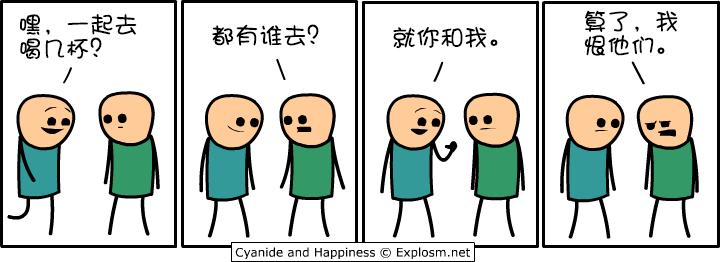
<style>
.page{position:relative;width:721px;height:262px;background:#ffffff}
.page>*{position:absolute;margin:0}
.t1{font:24px/24px "DFShaoNvW5";color:#000000}
.t2{font:24px "DFShaoNvW5";color:#000000}
</style>
<div class="page">
<p class="t1" style="left:20px;top:14px;width:117px;height:45px">嘿，一起去<br>喝几杯？</p>
<p class="t1" style="left:584px;top:10px;width:94px;height:46px">算了，我<br>恨他们。</p>
<p class="t2" style="left:212px;top:24px;width:107px;height:22px">都有谁去？</p>
<p class="t2" style="left:393px;top:26px;width:105px;height:23px">就你和我。</p>
</div>
